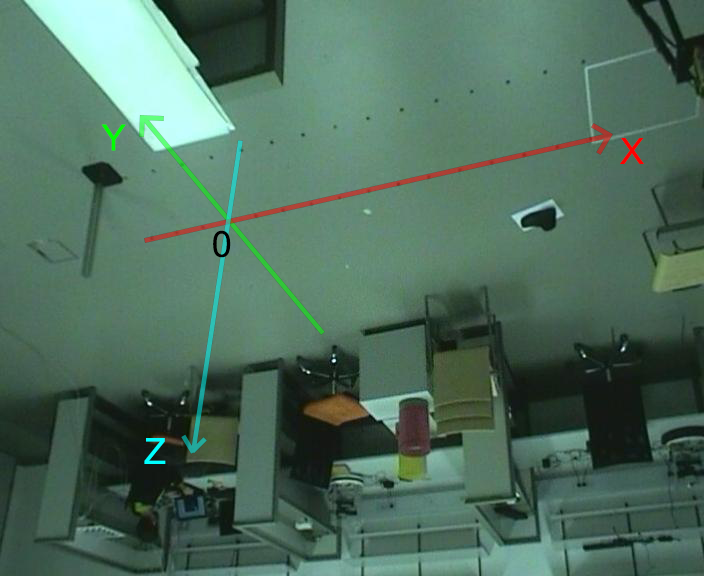
<style>
.page{position:relative;width:704px;height:576px}
.page>*{position:absolute;margin:0}
.t1{font:36px "ArialMT";color:#00ff00}
.t2{font:36px "ArialMT";color:#ff0000}
.t3{font:36px "ArialMT";color:#000000}
.t4{font:36px "ArialMT";color:#00ffff}
</style>
<div class="page">
<p class="t1" style="left:101px;top:124px;width:25px;height:27px">Y</p>
<p class="t2" style="left:620px;top:138px;width:24px;height:26px">X</p>
<p class="t3" style="left:213px;top:230px;width:18px;height:28px">0</p>
<p class="t4" style="left:144px;top:438px;width:22px;height:26px">Z</p>
</div>
